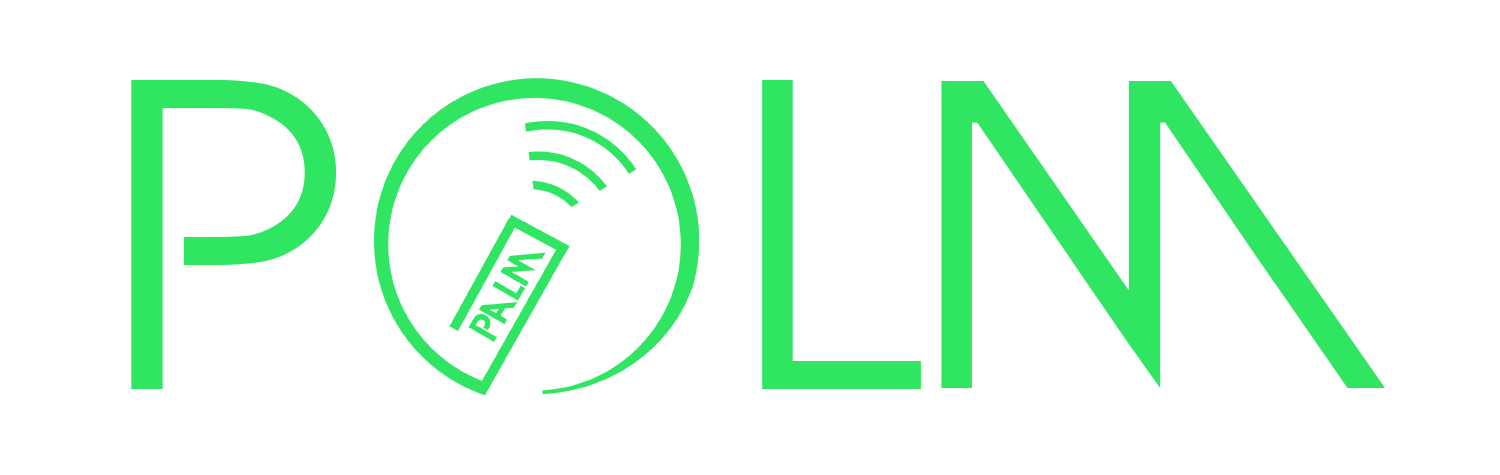
<style>
.page{position:relative;width:1500px;height:475px;background:#ffffff}
.page>*{position:absolute;margin:0}
.t1{font:411.2px "DevilBreezeBook";color:#2fe562}
</style>
<div class="page">
<p class="t1" style="left:131px;top:80px;width:1254px;height:309px">P  lm</p>
</div>
